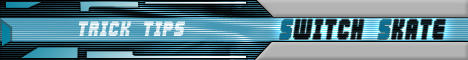
<style>
.page{position:relative;width:468px;height:60px}
.page>*{position:absolute;margin:0}
.t1{font:18px "Abduction2002";color:#ffffff}
.t2{font:24px "Abduction2002";letter-spacing:0.05em;color:#000000;scale:0.83 1}
.t3{font:24px "Abduction2002";letter-spacing:0.05em;color:#006e92;scale:0.83 1}
</style>
<div class="page">
<p class="t1" style="left:78px;top:21px;width:107px;height:15px">Trick Tips</p>
<p class="t2" style="left:279px;top:19px;width:167px;height:20px"><span class="t3">S</span>WITCH <span class="t3">S</span>KATE</p>
</div>
